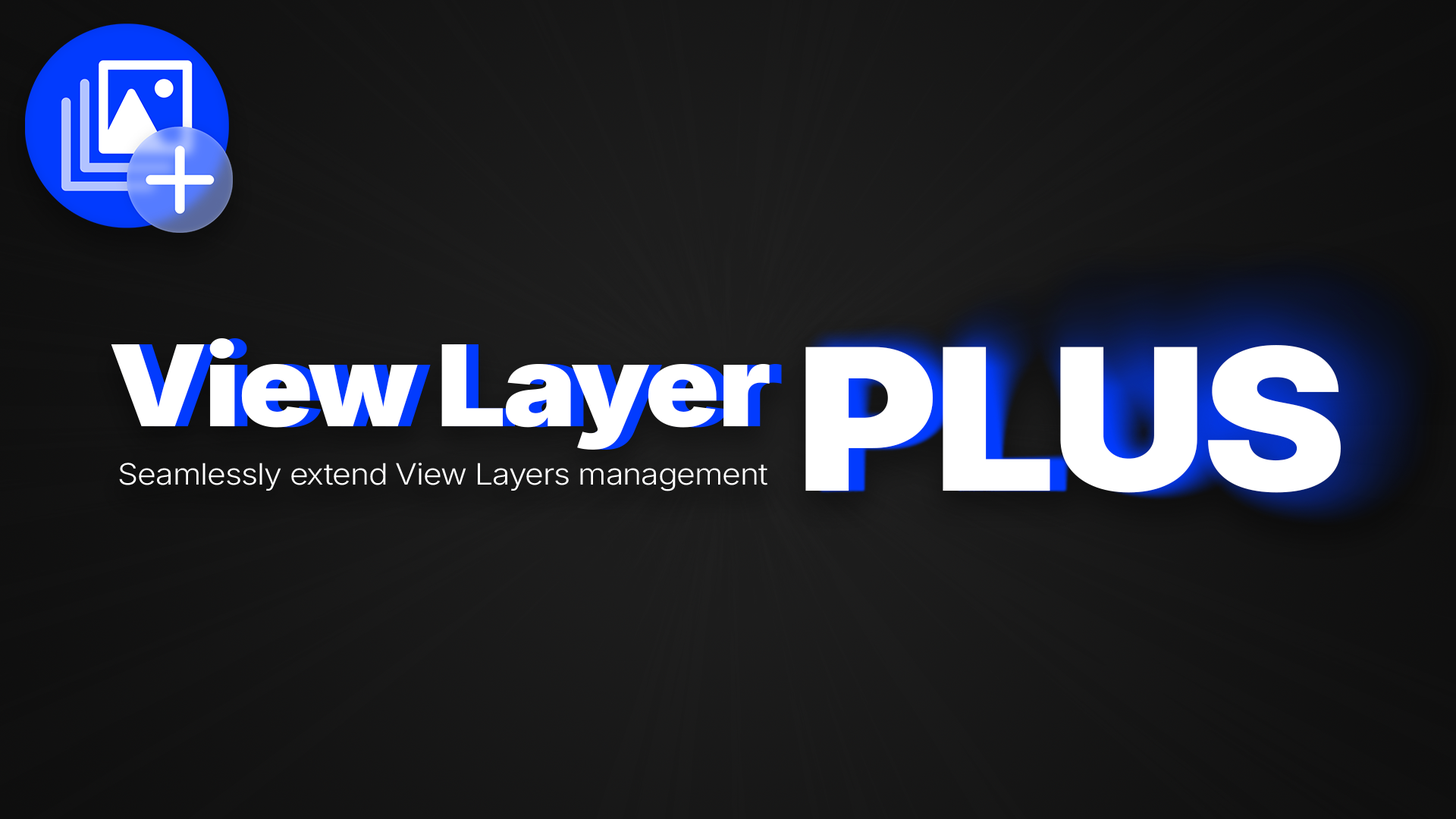
<style>
.page{position:relative;width:1456px;height:819px}
.page>*{position:absolute;margin:0}
.t1{font:112.5px "Inter-Black";letter-spacing:-0.025em;color:#ffffff;scale:1.1 1}
.t2{font:112.5px "Inter-Black";letter-spacing:-0.025em;scale:1.1 1}
.t3{font:197.4px "Inter-Black";letter-spacing:-0.025em;color:#ffffff;scale:1.1 1}
.t4{font:29.4px "Inter-Light";letter-spacing:-0.025em;color:#ffffff;scale:1.1 1}
</style>
<div class="page">
<p class="t1" style="left:111px;top:338px;width:659px;height:112px">View Layer</p>
<p class="t2" style="left:124px;top:338px;width:658px;height:112px">View Layer</p>
<p class="t3" style="left:805px;top:345px;width:536px;height:148px">PLUS</p>
<p class="t4" style="left:119px;top:463px;width:648px;height:28px">Seamlessly extend View Layers management</p>
</div>
